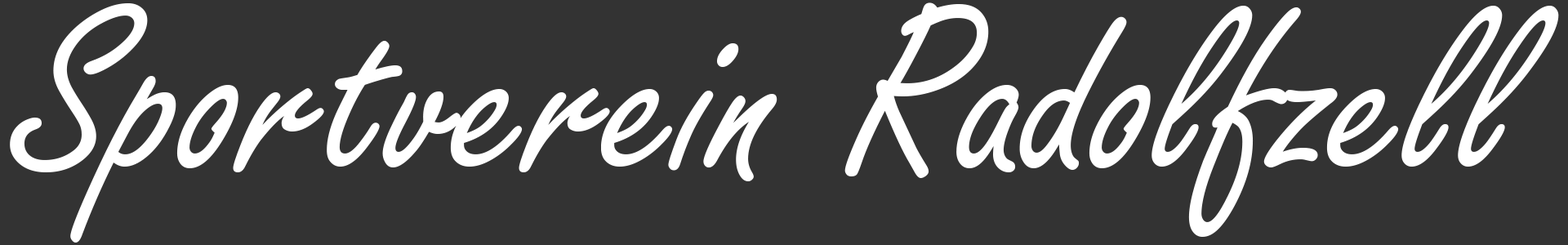
<style>
.page{position:relative;width:1568px;height:245px;background:#333333}
.page>*{position:absolute;margin:0}
.t1{font:259.7px "FreestyleScript-Regular";color:#ffffff}
</style>
<div class="page">
<p class="t1" style="left:10px;top:2px;width:1549px;height:241px">Sportverein Radolfzell</p>
</div>
